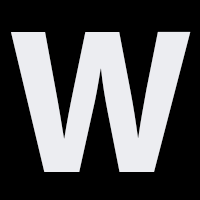
<style>
.page{position:relative;width:200px;height:200px;background:#000000}
.page>*{position:absolute;margin:0}
.t1{font:208.3px "MyriadPro-Bold";color:#ecedf1}
</style>
<div class="page">
<p class="t1" style="left:11px;top:31px;width:180px;height:141px">W</p>
</div>
